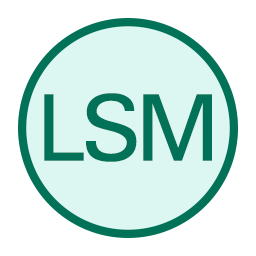
<style>
.page{position:relative;width:256px;height:256px;background:#ffffff}
.page>*{position:absolute;margin:0}
.t1{font:92px "ZurichBT-Roman";letter-spacing:-0.08em;color:#017158;font-weight:bold}
</style>
<div class="page">
<p class="t1" style="left:44px;top:93px;width:168px;height:69px">LSM</p>
</div>
